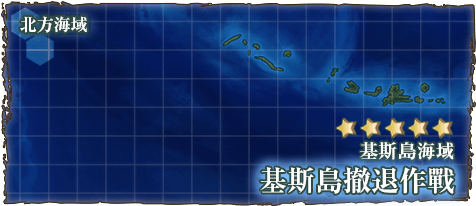
<style>
.page{position:relative;width:476px;height:206px}
.page>*{position:absolute;margin:0}
.t1{font:17px "RyuminPr6N-ExBold";color:#ffffff}
.t2{font:19px "RyuminPro-ExBold";color:#ffffff}
.t3{font:28px "RyuminPro-ExBold";color:#ffffff}
</style>
<div class="page">
<p class="t1" style="left:20px;top:16px;width:67px;height:17px">北方海域</p>
<p class="t2" style="left:360px;top:142px;width:94px;height:18px">基斯島海域</p>
<p class="t3" style="left:260px;top:167px;width:195px;height:27px">基斯島撤退作戰</p>
</div>
